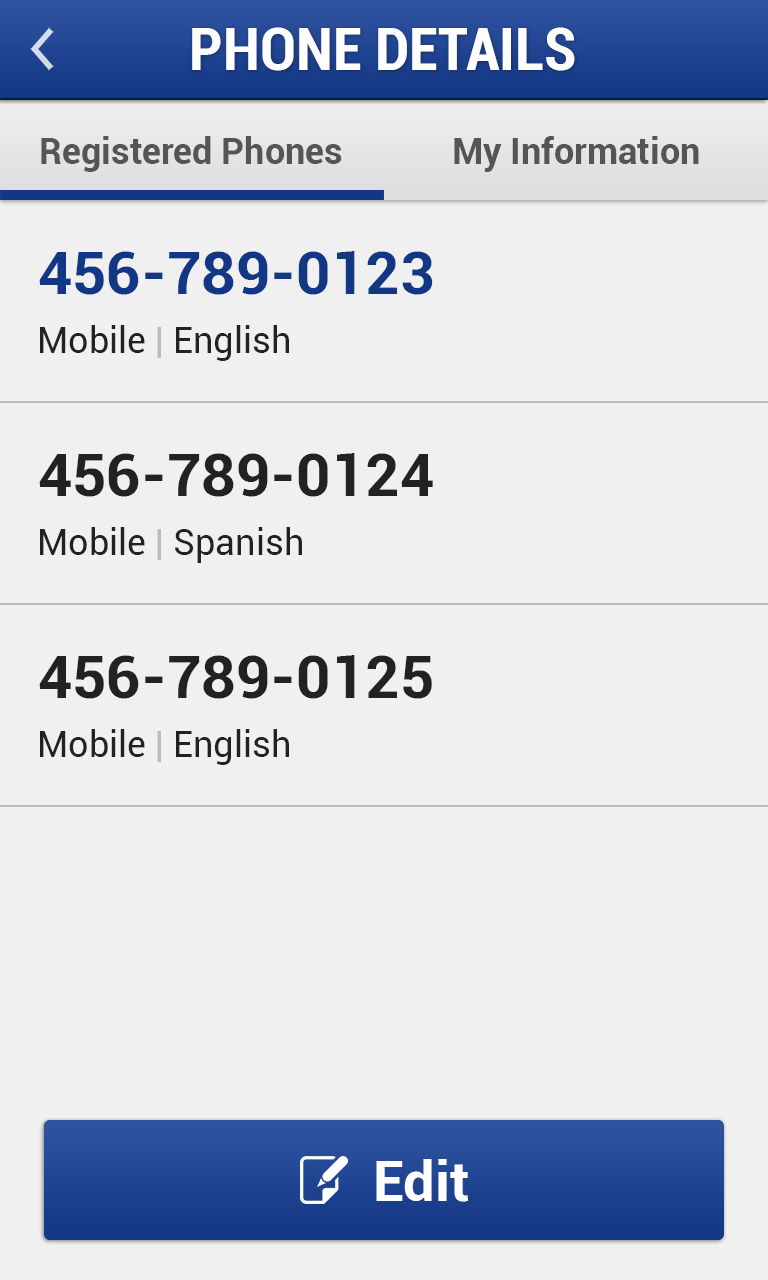
<style>
.page{position:relative;width:768px;height:1280px;background:#f0f0f0}
.page>*{position:absolute;margin:0}
.t1{font:60px "Roboto-BoldCondensed";color:#ffffff}
.t2{font:36px "Roboto-Bold";color:#555555}
.t3{font:60px "Roboto-Bold";color:#123785}
.t4{font:36px "Roboto-Regular";color:#222222}
.t5{font:36px "Roboto-Regular";color:#bbbbbb}
.t6{font:60px "Roboto-Bold";color:#222222}
.t7{font:56px "Roboto-Bold";color:#ffffff}
</style>
<div class="page">
<p class="t1" style="left:192px;top:27px;width:383px;height:44px">PHONE DETAILS</p>
<p class="t2" style="left:41px;top:136px;width:301px;height:36px">Registered Phones</p>
<p class="t2" style="left:454px;top:136px;width:245px;height:36px">My Information</p>
<p class="t3" style="left:39px;top:251px;width:394px;height:44px">456-789-0123</p>
<p class="t4" style="left:40px;top:325px;width:249px;height:36px">Mobile<span class="t5"> | </span>English</p>
<p class="t6" style="left:39px;top:453px;width:394px;height:44px">456-789-0124</p>
<p class="t4" style="left:40px;top:527px;width:262px;height:36px">Mobile<span class="t5"> | </span>Spanish</p>
<p class="t6" style="left:39px;top:655px;width:393px;height:44px">456-789-0125</p>
<p class="t4" style="left:40px;top:729px;width:249px;height:36px">Mobile<span class="t5"> | </span>English</p>
<p class="t7" style="left:376px;top:1159px;width:92px;height:43px">Edit</p>
</div>
